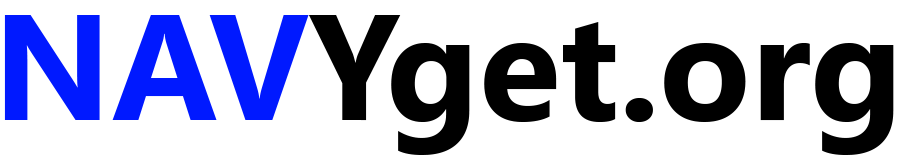
<style>
.page{position:relative;width:900px;height:160px;background:#ffffff}
.page>*{position:absolute;margin:0}
.t1{font:150px "SegoeUI-Bold";color:#000000}
.t2{font:150px "SegoeUI-Bold";color:#0019ff}
</style>
<div class="page">
<p class="t1" style="left:4px;top:15px;width:890px;height:140px"><span class="t2">NAV</span>Yget.org</p>
</div>
